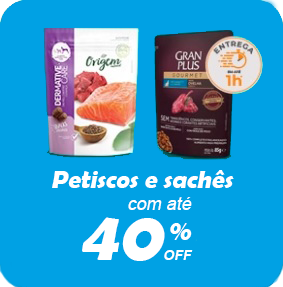
<style>
.page{position:relative;width:283px;height:287px;background:#00a1e4}
.page>*{position:absolute;margin:0}
.t1{font:25px "BerlinSansFBDemi-Bold";color:#ffffff;font-style:italic}
.t2{font:18px "ArialMT";color:#ffffff;font-style:italic}
.t3{font:70px "BerlinSansFBDemi-Bold";color:#ffffff;font-style:italic}
.t4{font:28px "BerlinSansFBDemi-Bold";color:#ffffff;font-style:italic}
.t5{font:14px "Arial-BoldMT";color:#ffffff;font-style:italic}
</style>
<div class="page">
<p class="t1" style="left:52px;top:170px;width:182px;height:18px">Petiscos e sachês</p>
<p class="t2" style="left:128px;top:197px;width:64px;height:13px">com até</p>
<p class="t3" style="left:82px;top:217px;width:83px;height:44px">40</p>
<p class="t4" style="left:170px;top:223px;width:22px;height:17px">%</p>
<p class="t5" style="left:164px;top:250px;width:29px;height:10px">OFF</p>
</div>
